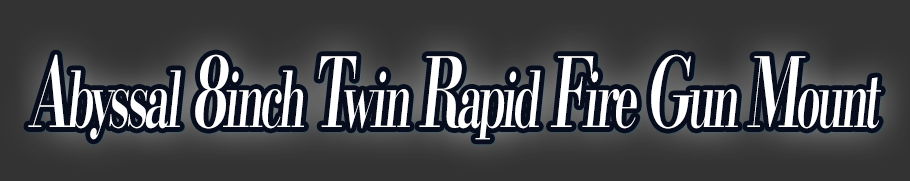
<style>
.page{position:relative;width:910px;height:181px;background:#333333}
.page>*{position:absolute;margin:0}
.t1{font:76.8px "KochoStd-Heavy";letter-spacing:-0.08em;color:#ffffff;font-style:italic;scale:0.58 1}
.t2{font:96px "KochoStd-Heavy";letter-spacing:-0.08em;color:#ffffff;font-style:italic;scale:0.58 1}
</style>
<div class="page">
<p class="t1" style="left:28px;top:54px;width:853px;height:86px"><span class="t2">A</span>byssal<span class="t2"> 8</span>inch <span class="t2">T</span>win <span class="t2">R</span>apid<span class="t2"> F</span>ire <span class="t2">G</span>un <span class="t2">M</span>ount</p>
</div>
